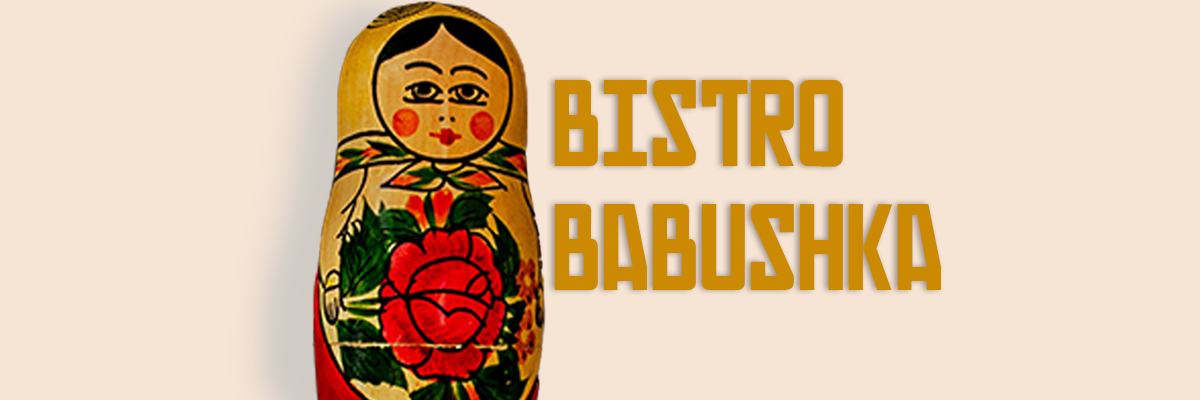
<style>
.page{position:relative;width:1200px;height:400px;background:#f6e5d5}
.page>*{position:absolute;margin:0}
.t1{font:103.2px "Russian";color:#cc8a02}
</style>
<div class="page">
<p class="t1" style="left:554px;top:80px;width:387px;height:210px">bisTrO babushka</p>
</div>
